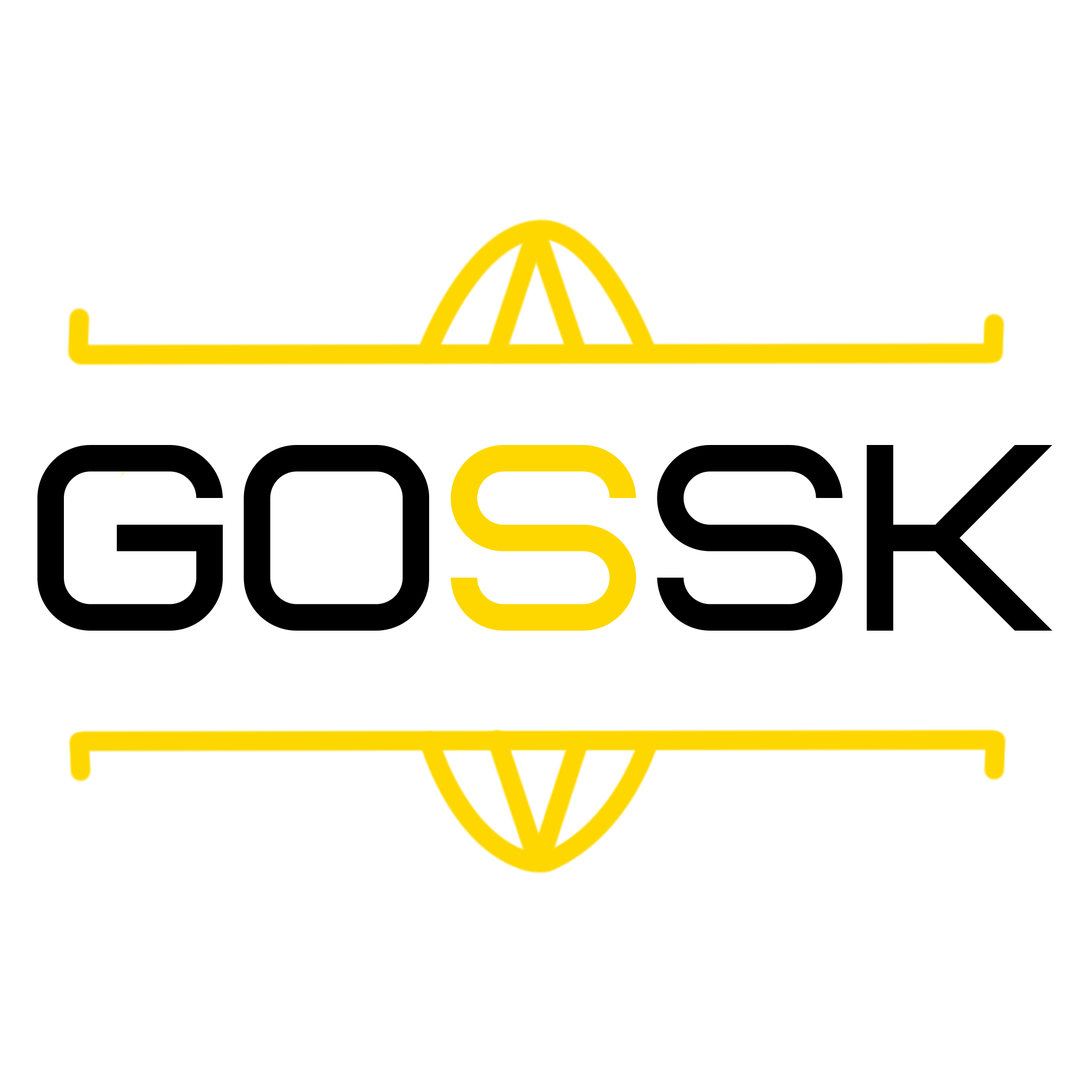
<style>
.page{position:relative;width:1092px;height:1092px;background:#ffffff}
.page>*{position:absolute;margin:0}
.t1{font:265px "Bicubik";color:#000000}
.t2{font:265px "Bicubik";color:#ffd700}
</style>
<div class="page">
<p class="t1" style="left:37px;top:445px;width:1016px;height:186px">GO<span class="t2">S</span>SK</p>
</div>
